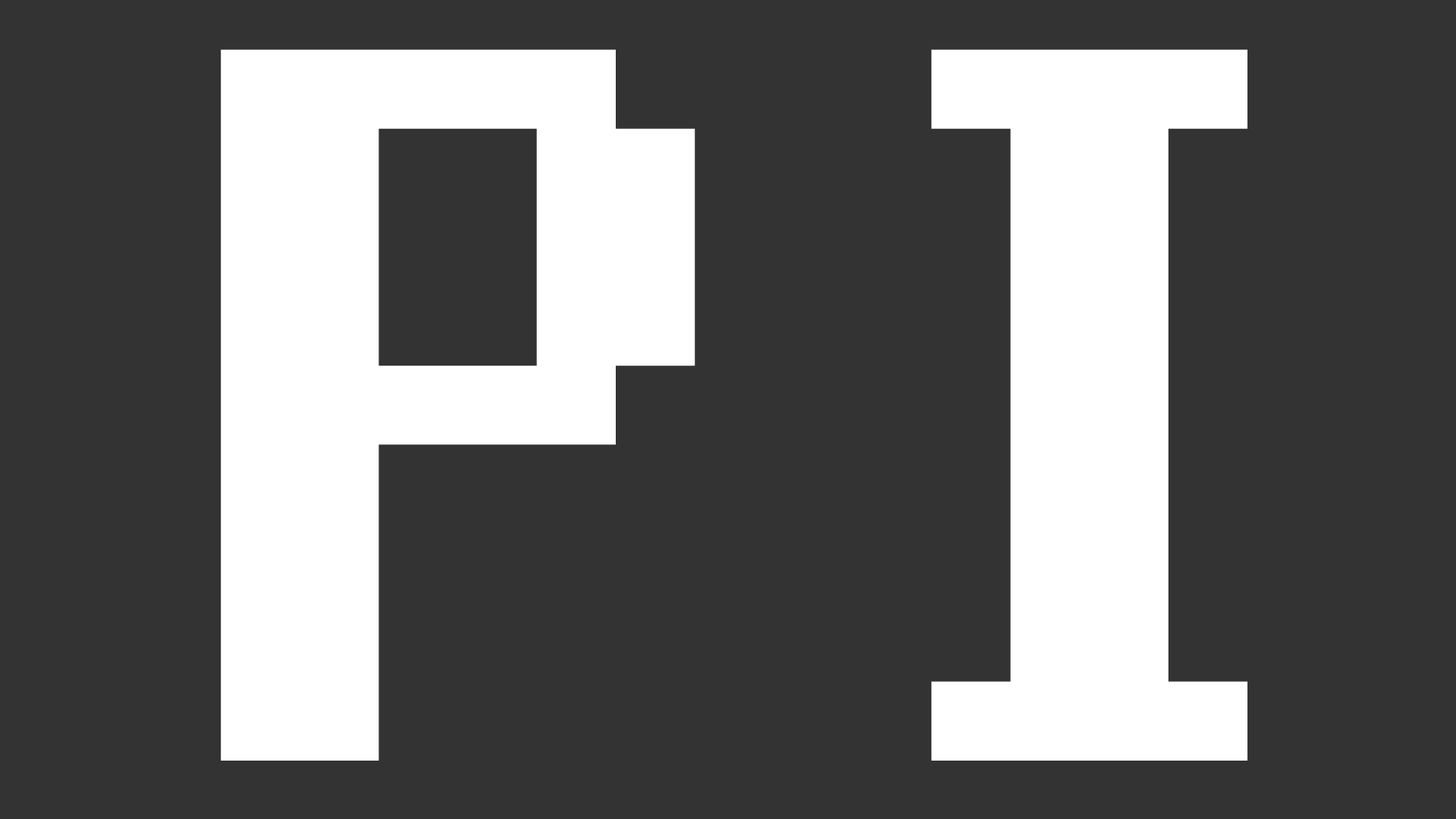
<style>
.page{position:relative;width:1456px;height:819px;background:#333333}
.page>*{position:absolute;margin:0}
.t1{font:1011.1px "Fixedsys";color:#ffffff}
</style>
<div class="page">
<p class="t1" style="left:221px;top:49px;width:1026px;height:712px">PI</p>
</div>
